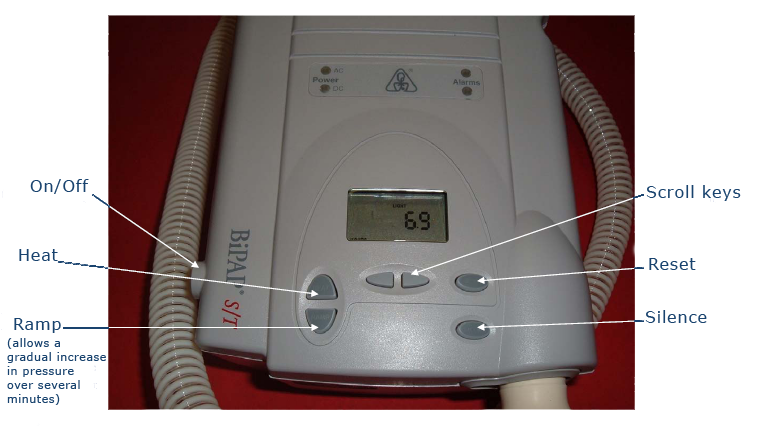
<style>
.page{position:relative;width:766px;height:440px;background:#ffffff}
.page>*{position:absolute;margin:0}
.t1{font:16px "Verdana";letter-spacing:0.05em;color:#19436e}
.t2{font:11px/14px "Verdana";letter-spacing:0.05em;color:#19436e}
.t3{font:11px/24px "Verdana";letter-spacing:0.05em;color:#19436e}
</style>
<div class="page">
<p class="t1" style="left:30px;top:179px;width:59px;height:15px">On/Off</p>
<p class="t1" style="left:646px;top:185px;width:95px;height:16px">Scroll keys</p>
<p class="t1" style="left:19px;top:249px;width:39px;height:12px">Heat</p>
<p class="t1" style="left:649px;top:258px;width:47px;height:12px">Reset</p>
<p class="t1" style="left:14px;top:318px;width:47px;height:15px">Ramp</p>
<p class="t1" style="left:645px;top:310px;width:62px;height:13px">Silence</p>
<p class="t2" style="left:7px;top:338px;width:99px;height:67px"><span class="t3">(</span>allows a<br>gradual increase<br>in pressure<br>over several<br>minutes)</p>
</div>
